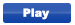
<style>
.page{position:relative;width:75px;height:25px;background:#ffffff}
.page>*{position:absolute;margin:0}
.t1{font:11.2px "Arial-Black";color:#ffffff}
</style>
<div class="page">
<p class="t1" style="left:23px;top:8px;width:27px;height:12px">Play</p>
</div>
